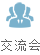
<style>
.page{position:relative;width:40px;height:55px;background:#ffffff}
.page>*{position:absolute;margin:0}
.t1{font:22.5px "SimSun";letter-spacing:0.075em;color:#666666;font-variant:small-caps}
</style>
<div class="page">
<p class="t1" style="left:1px;top:39px;width:39px;height:12px">交流会</p>
</div>
